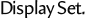
<style>
.page{position:relative;width:86px;height:18px;background:#ffffff}
.page>*{position:absolute;margin:0}
.t1{font:18.7px "Amira-Roman";letter-spacing:-0.025em;color:#000000}
</style>
<div class="page">
<p class="t1" style="left:1px;top:0px;width:84px;height:19px;opacity:0.96">Display Set.</p>
</div>
